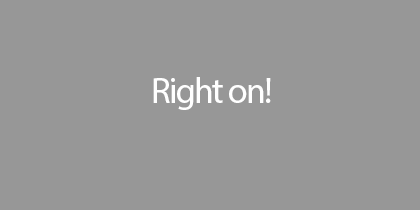
<style>
.page{position:relative;width:420px;height:210px;background:#979797}
.page>*{position:absolute;margin:0}
.t1{font:36px "MyriadPro-Regular";letter-spacing:-0.05em;color:#ffffff}
</style>
<div class="page">
<p class="t1" style="left:153px;top:77px;width:118px;height:33px">Right on!</p>
</div>
